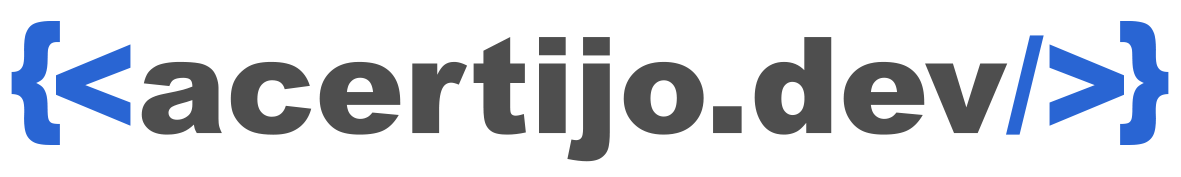
<style>
.page{position:relative;width:1181px;height:177px;background:#ffffff}
.page>*{position:absolute;margin:0}
.t1{font:132.1px "Arial-Black";color:#2965d3}
.t2{font:133.6px "Arial-Black";color:#4e4e4e}
.t3{font:133.6px "Arial-Black";color:#2965d3}
</style>
<div class="page">
<p class="t1" style="left:11px;top:21px;width:1158px;height:124px">{                        }</p>
<p class="t2" style="left:56px;top:35px;width:1068px;height:127px"><span class="t3">&lt;</span>acertijo.dev<span class="t3">/&gt;</span></p>
</div>
